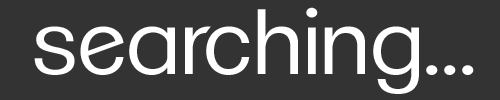
<style>
.page{position:relative;width:500px;height:100px;background:#333333}
.page>*{position:absolute;margin:0}
.t1{font:90px "ClementePDag-Book";color:#ffffff}
</style>
<div class="page">
<p class="t1" style="left:34px;top:7px;width:440px;height:87px">searching...</p>
</div>
